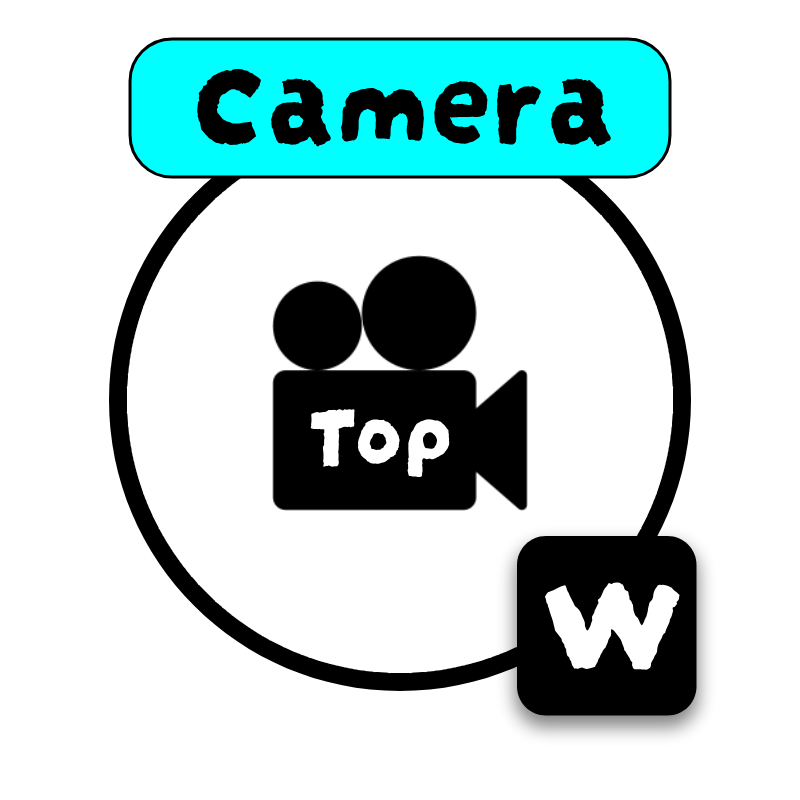
<style>
.page{position:relative;width:800px;height:800px;background:#ffffff}
.page>*{position:absolute;margin:0}
.t1{font:123px "DarumadropOne-Regular";color:#000000}
.t2{font:94px "DarumadropOne-Regular";color:#ffffff}
.t3{font:150px "DarumadropOne-Regular";color:#ffffff}
</style>
<div class="page">
<p class="t1" style="left:196px;top:68px;width:415px;height:79px">Camera</p>
<p class="t2" style="left:310px;top:409px;width:140px;height:69px">Top</p>
<p class="t3" style="left:545px;top:582px;width:135px;height:88px">W</p>
</div>
